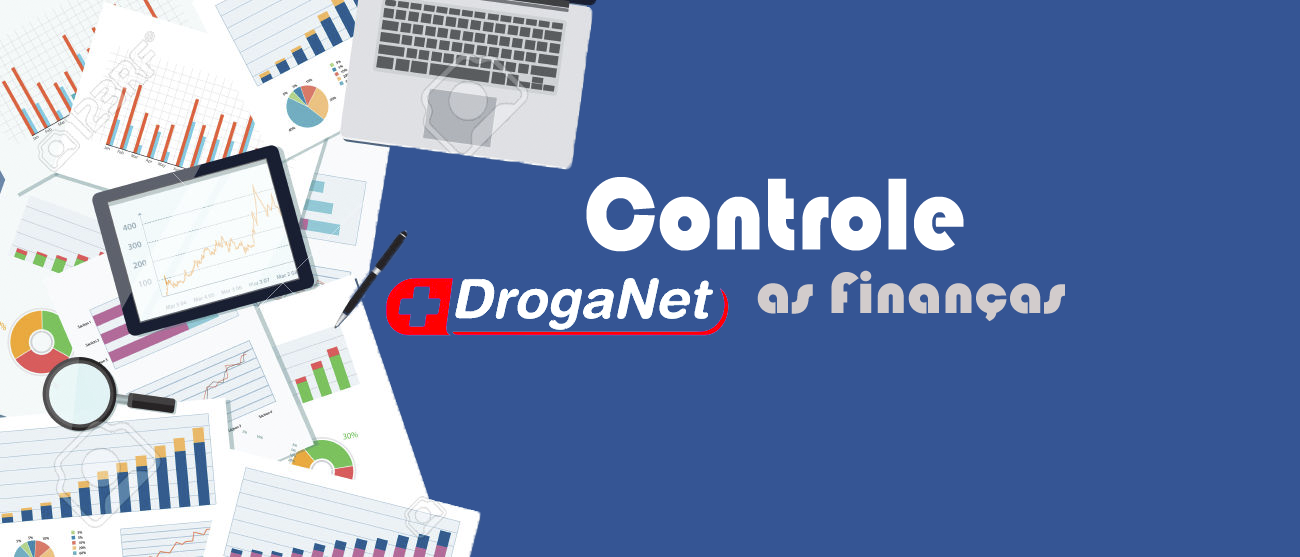
<style>
.page{position:relative;width:1300px;height:557px;background:#355594}
.page>*{position:absolute;margin:0}
.t1{font:106.1px "Bauhaus93";color:#ffffff;scale:0.92 1}
.t2{font:60px "Bauhaus93";color:#d2cccc}
</style>
<div class="page">
<p class="t1" style="left:586px;top:177px;width:378px;height:75px">Controle</p>
<p class="t2" style="left:757px;top:270px;width:308px;height:52px">as Finanças</p>
</div>
